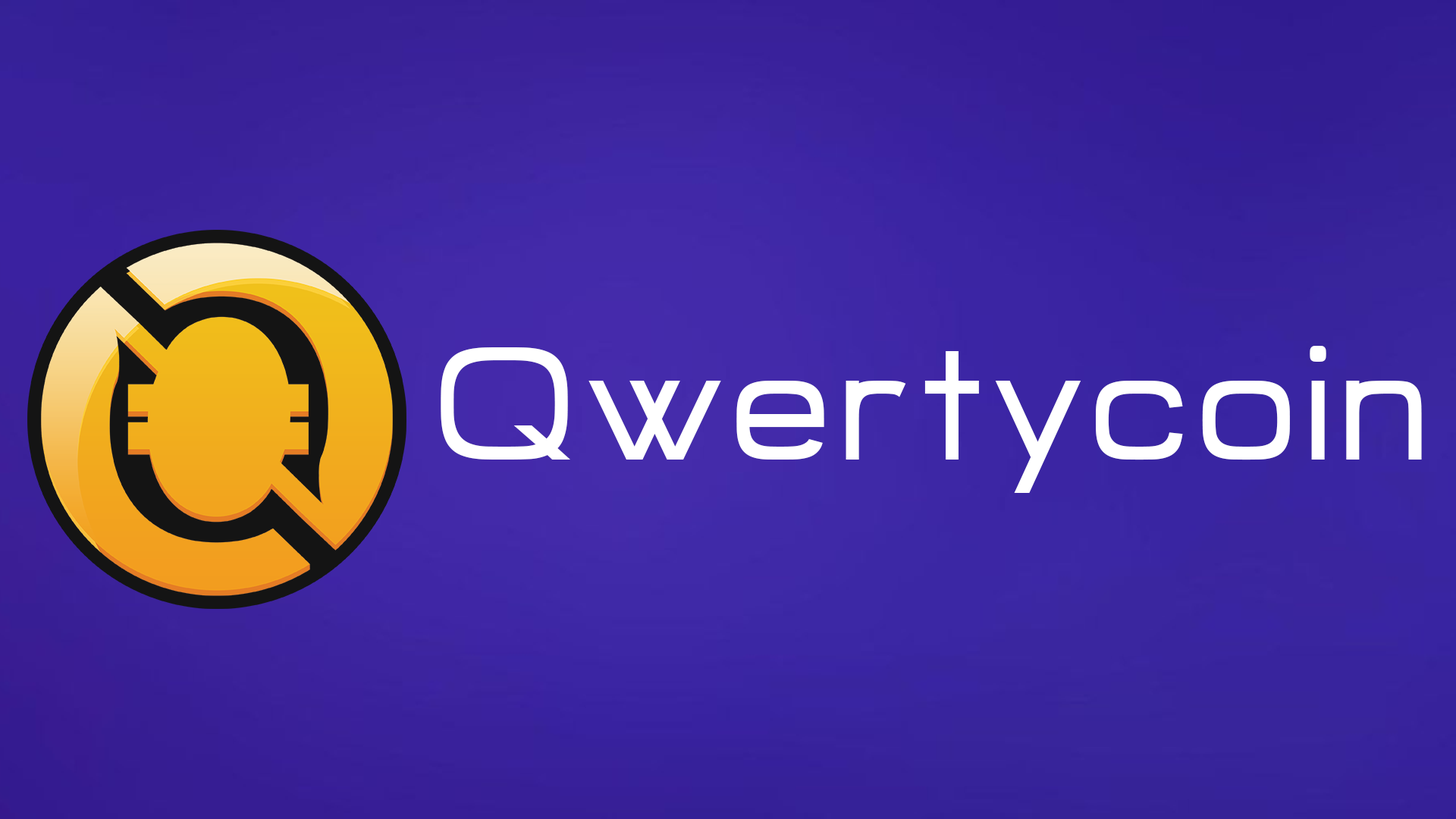
<style>
.page{position:relative;width:1456px;height:819px}
.page>*{position:absolute;margin:0}
.t1{font:174.4px "Jepanten";color:#ffffff}
</style>
<div class="page">
<p class="t1" style="left:441px;top:346px;width:981px;height:147px">Qwertycoin</p>
</div>
